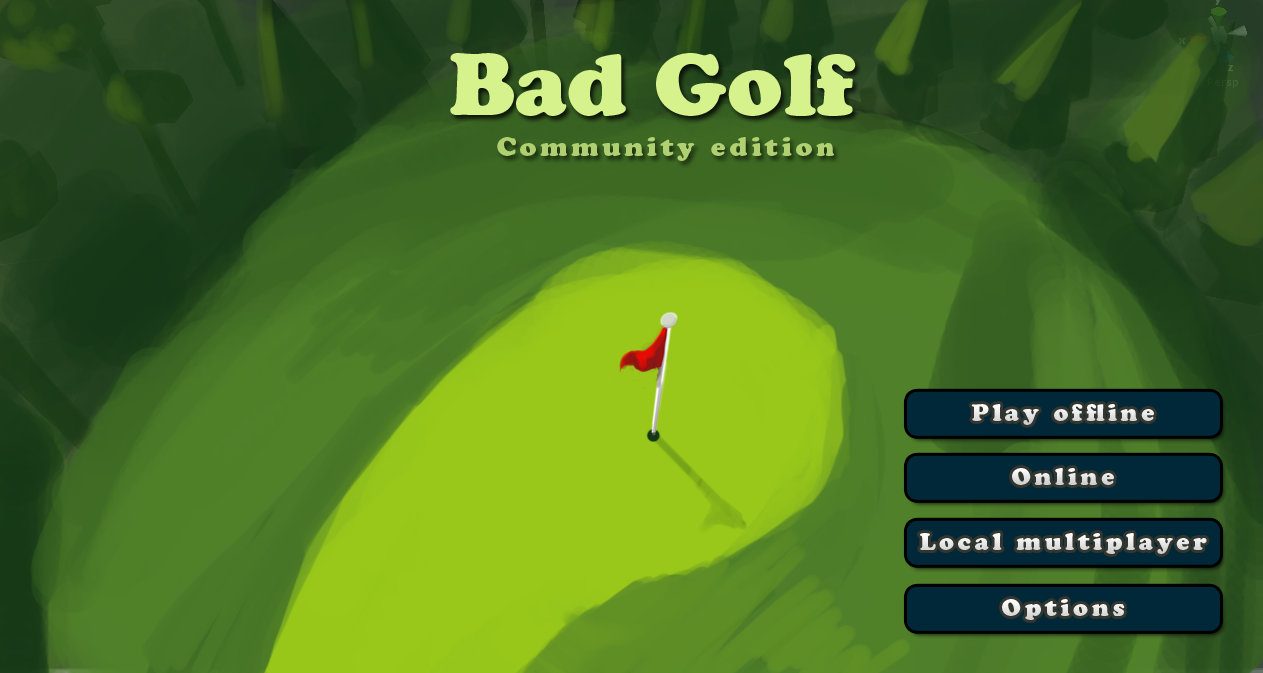
<style>
.page{position:relative;width:1263px;height:673px}
.page>*{position:absolute;margin:0}
.t1{font:87.6px "CooperBlackStd";color:#d6f28c}
.t2{font:26.3px "CooperBlackStd";letter-spacing:0.15em;color:#b0d072}
.t3{font:24px "CooperBlackStd";letter-spacing:0.15em;color:#e9eae9}
.t4{font:24px "CooperBlackStd";letter-spacing:0.15em;color:#dfe0df}
.t5{font:24px "CooperBlackStd";letter-spacing:0.15em;color:#e6e7e6}
</style>
<div class="page">
<p class="t1" style="left:450px;top:53px;width:406px;height:63px">Bad Golf</p>
<p class="t2" style="left:497px;top:137px;width:337px;height:24px">Community edition</p>
<p class="t3" style="left:971px;top:404px;width:183px;height:21px">Play offline</p>
<p class="t4" style="left:1012px;top:468px;width:102px;height:17px">Online</p>
<p class="t5" style="left:920px;top:533px;width:287px;height:21px">Local multiplayer</p>
<p class="t5" style="left:1002px;top:599px;width:123px;height:21px">Options</p>
</div>
